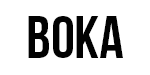
<style>
.page{position:relative;width:150px;height:75px;background:#ffffff}
.page>*{position:absolute;margin:0}
.t1{font:60px "BebasNeue";color:#020202}
</style>
<div class="page">
<p class="t1" style="left:28px;top:16px;width:95px;height:42px">BOKA</p>
</div>
